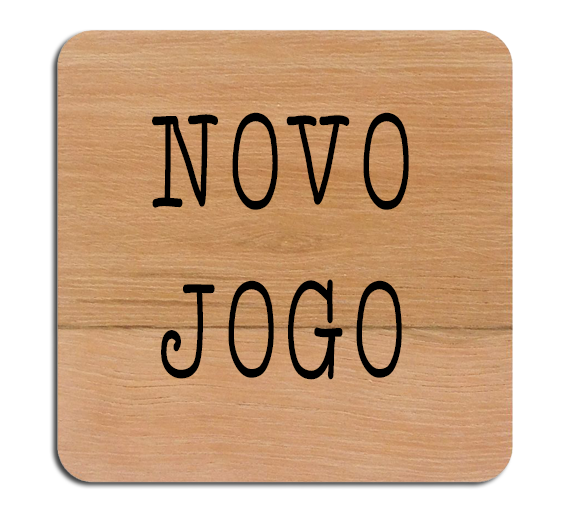
<style>
.page{position:relative;width:564px;height:524px;background:#ffffff}
.page>*{position:absolute;margin:0}
.t1{font:140px "ATypewriterForMe";color:#000000;scale:0.63 1}
</style>
<div class="page">
<p class="t1" style="left:152px;top:112px;width:257px;height:268px;text-align:center">NOVO<br>JOGO</p>
</div>
